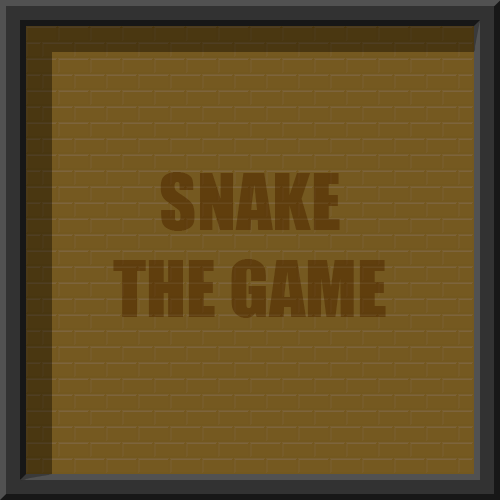
<style>
.page{position:relative;width:500px;height:500px;background:#755920}
.page>*{position:absolute;margin:0}
.t1{font:72px "Impact";color:#4a3711}
</style>
<div class="page">
<p class="t1" style="left:113px;top:172px;width:273px;height:146px;text-align:center;opacity:0.83">SNAKE<br>THE GAME</p>
</div>
